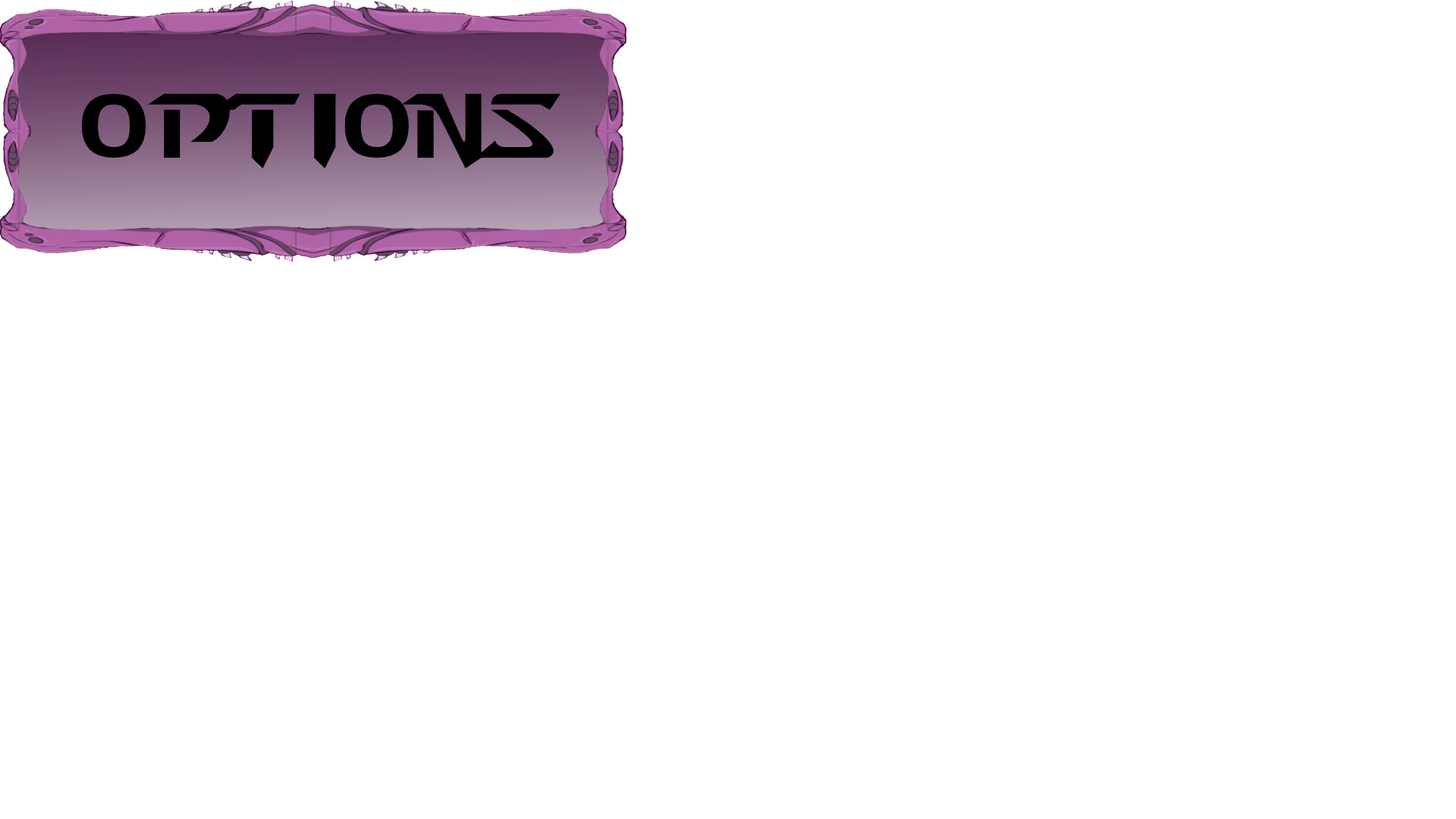
<style>
.page{position:relative;width:1456px;height:819px;background:#ffffff}
.page>*{position:absolute;margin:0}
.t1{font:91px "StarcraftNormal";color:#000000}
</style>
<div class="page">
<p class="t1" style="left:81px;top:93px;width:480px;height:76px">Options</p>
</div>
